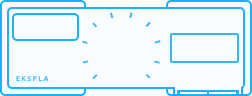
<style>
.page{position:relative;width:252px;height:96px;background:#f6fcff}
.page>*{position:absolute;margin:0}
.t1{font:7.5px "Candara-Bold";letter-spacing:0.2em;color:#3eb5f1;text-transform:uppercase}
</style>
<div class="page">
<p class="t1" style="left:16px;top:76px;width:33px;height:6px">ekspla</p>
</div>
